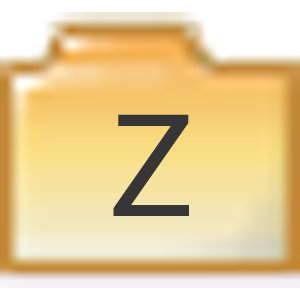
<style>
.page{position:relative;width:300px;height:300px}
.page>*{position:absolute;margin:0}
.t1{font:150px "MyriadPro-Regular";color:#363636}
</style>
<div class="page">
<p class="t1" style="left:113px;top:114px;width:76px;height:102px">Z</p>
</div>
